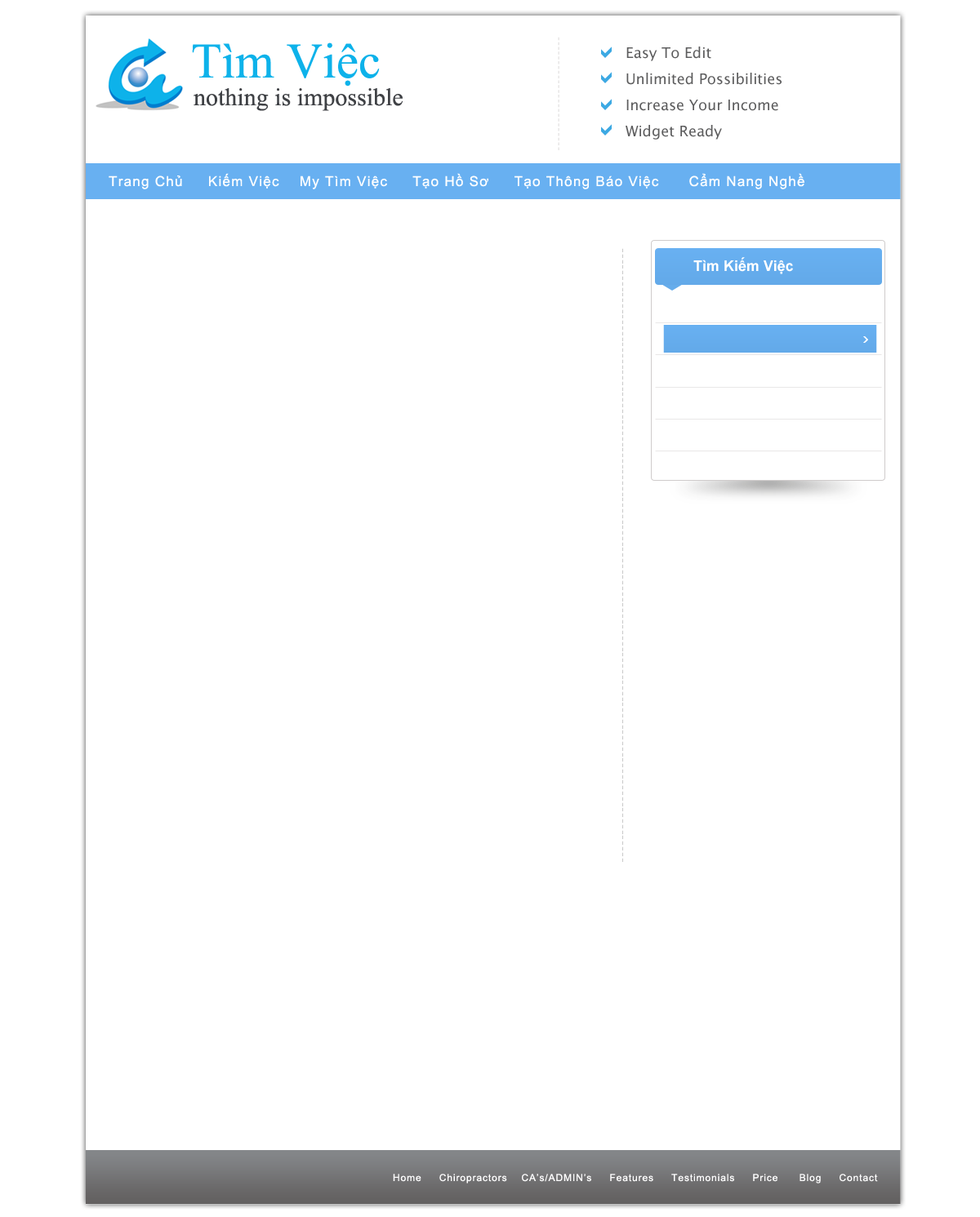
<style>
.page{position:relative;width:980px;height:1217px;background:#ffffff}
.page>*{position:absolute;margin:0}
.t1{font:9.8px "ArialMT";letter-spacing:0.155em;color:#e2e0e0}
.t2{font:49.8px "TimesNewRomanPSMT";color:#0db2ea}
.t3{font:14.7px/26.1px "LucidaGrande";color:#5c5c5d}
.t4{font:24.5px "TimesNewRomanPSMT";color:#3f4145}
.t5{font:13.9px "ArialMT";letter-spacing:0.075em;color:#ffffff}
.t6{font:8.2px "LucidaGrande";letter-spacing:0.1em;color:#b5b5b6}
.t7{font:14.7px "Arial-BoldMT";color:#ffffff}
.t8{font:9.8px "ArialMT";letter-spacing:0.075em;color:#ffffff}
</style>
<div class="page">
<p class="t1" style="left:558px;top:37px;width:1px;height:113px;rotate:90deg">------------------------</p>
<p class="t2" style="left:192px;top:42px;width:188px;height:45px">Tìm Việc</p>
<p class="t3" style="left:625px;top:47px;width:156px;height:93px">Easy To Edit<br>Unlimited Possibilities<br>Increase Your Income<br>Widget Ready</p>
<p class="t4" style="left:193px;top:88px;width:209px;height:23px">nothing is impossible</p>
<p class="t5" style="left:109px;top:173px;width:695px;height:16px">Trang Chủ     Kiếm Việc    My Tìm Việc     Tạo Hồ Sơ     Tạo Thông Báo Việc      Cẩm Nang Nghề</p>
<p class="t6" style="left:622px;top:248px;width:1px;height:614px;rotate:90deg">---------------------------------------------------------------------------------------------------------------</p>
<p class="t7" style="left:693px;top:257px;width:100px;height:17px">Tìm Kiếm Việc</p>
<p class="t8" style="left:393px;top:1174px;width:485px;height:10px">Home     Chiropractors    CA’s/ADMIN’s     Features     Testimonials     Price      Blog     Contact</p>
</div>
